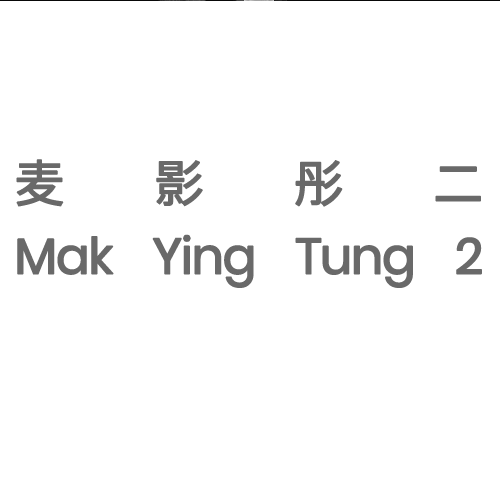
<style>
.page{position:relative;width:500px;height:500px;background:#ffffff}
.page>*{position:absolute;margin:0}
.t1{font:50px/72px "Poppins-Regular";letter-spacing:-0.05em;color:#696969;font-weight:bold}
.t2{font:50px/72px "SourceHanSansCN-Regular";letter-spacing:-0.05em;color:#696969;font-weight:bold}
</style>
<div class="page">
<p class="t1" style="left:16px;top:158px;width:466px;height:129px;text-align:justify"><span class="t2">麦影彤二<br></span>Mak Ying Tung 2</p>
</div>
